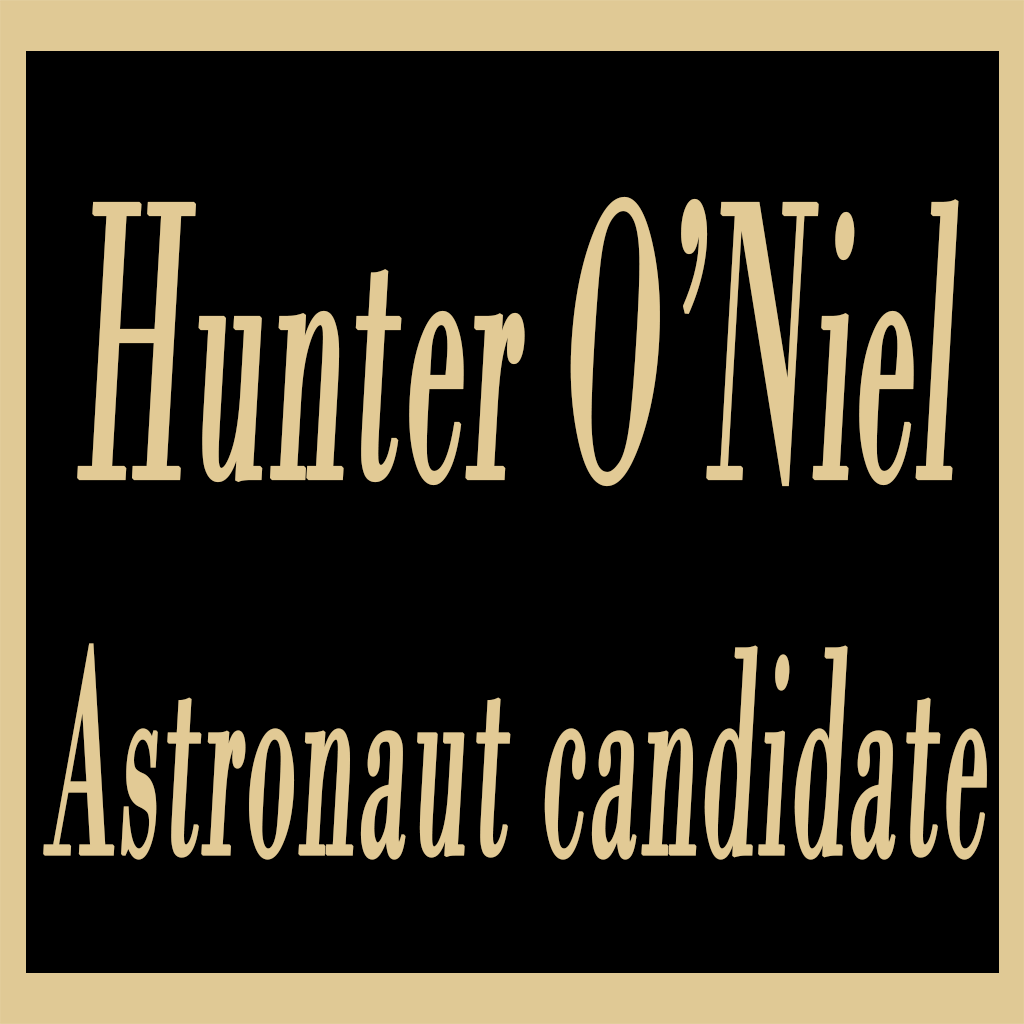
<style>
.page{position:relative;width:1024px;height:1024px;background:#000000}
.page>*{position:absolute;margin:0}
.t1{font:313.4px "BodoniMT";letter-spacing:0.005em;color:#e2ca95;font-weight:bold;font-style:italic;scale:0.33 1}
.t2{font:417.8px "BodoniMT";letter-spacing:0.005em;color:#e2ca95;font-weight:bold;font-style:italic;scale:0.33 1}
</style>
<div class="page">
<p class="t1" style="left:43px;top:196px;width:944px;height:664px;text-align:center"><span class="t2">Hunter O’Niel<br></span>Astronaut candidate</p>
</div>
